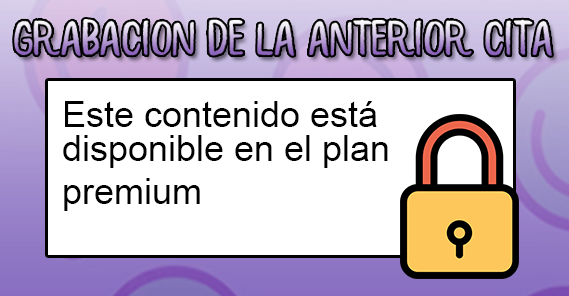
<style>
.page{position:relative;width:569px;height:296px;background:#ffffff}
.page>*{position:absolute;margin:0}
.t1{font:36px "ArialMT";color:#000000}
</style>
<div class="page">
<p class="t1" style="left:65px;top:101px;width:312px;height:26px">Este contenido está</p>
<p class="t1" style="left:63px;top:135px;width:325px;height:76px">disponible en el plan<br>premium</p>
</div>
